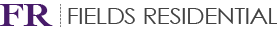
<style>
.page{position:relative;width:277px;height:35px;background:#ffffff}
.page>*{position:absolute;margin:0}
.t1{font:21.6px "CenturyGothic";letter-spacing:-0.02em;color:#424242;text-transform:uppercase;scale:1.14 1}
.t2{font:34.2px "Cochin-Bold";letter-spacing:-0.02em;color:#481b6a;text-transform:uppercase;scale:1.14 1}
</style>
<div class="page">
<p class="t1" style="left:0px;top:4px;width:278px;height:22px"><span class="t2">FR  </span>Fields Residential</p>
</div>
